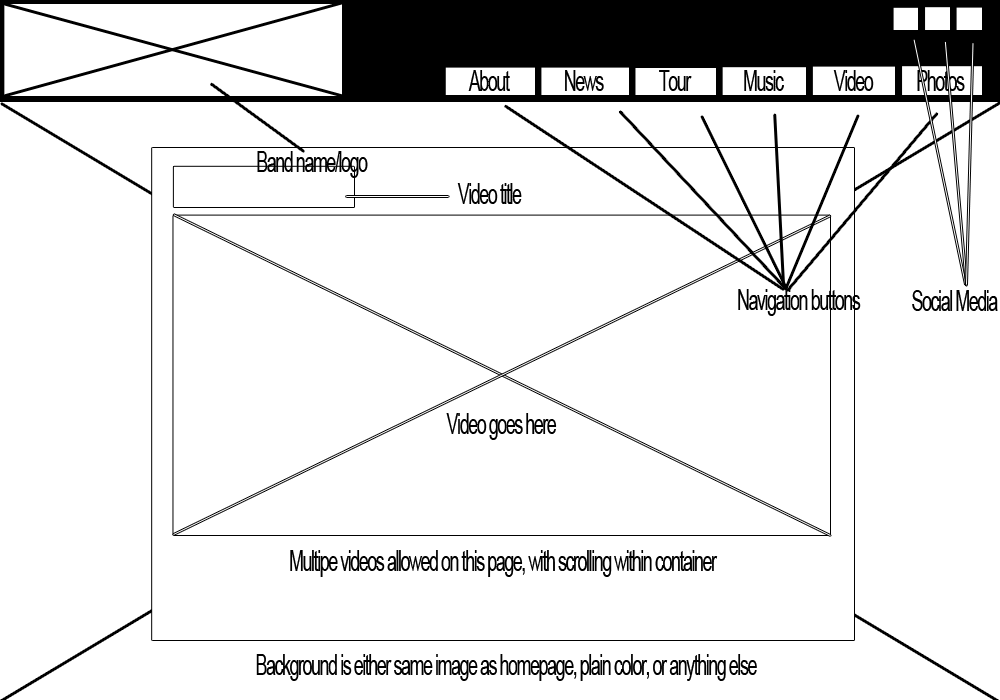
<style>
.page{position:relative;width:1000px;height:700px;background:#ffffff}
.page>*{position:absolute;margin:0}
.t1{font:28.9px "ArialMT";letter-spacing:-0.08em;color:#000000;scale:0.62 1}
</style>
<div class="page">
<p class="t1" style="left:468px;top:70px;width:42px;height:21px">About</p>
<p class="t1" style="left:565px;top:70px;width:39px;height:21px">News</p>
<p class="t1" style="left:659px;top:70px;width:33px;height:21px">Tour</p>
<p class="t1" style="left:744px;top:70px;width:40px;height:21px">Music</p>
<p class="t1" style="left:833px;top:70px;width:41px;height:21px">Video</p>
<p class="t1" style="left:917px;top:70px;width:48px;height:21px">Photos</p>
<p class="t1" style="left:257px;top:151px;width:111px;height:27px">Band name/logo</p>
<p class="t1" style="left:457px;top:183px;width:65px;height:21px">Video title</p>
<p class="t1" style="left:738px;top:289px;width:123px;height:27px">Navigation buttons</p>
<p class="t1" style="left:912px;top:290px;width:86px;height:21px">Social Media</p>
<p class="t1" style="left:446px;top:413px;width:111px;height:27px">Video goes here</p>
<p class="t1" style="left:290px;top:550px;width:428px;height:27px">Multipe videos allowed on this page, with scrolling within container</p>
<p class="t1" style="left:256px;top:654px;width:501px;height:27px">Background is either same image as homepage, plain color, or anything else</p>
</div>
